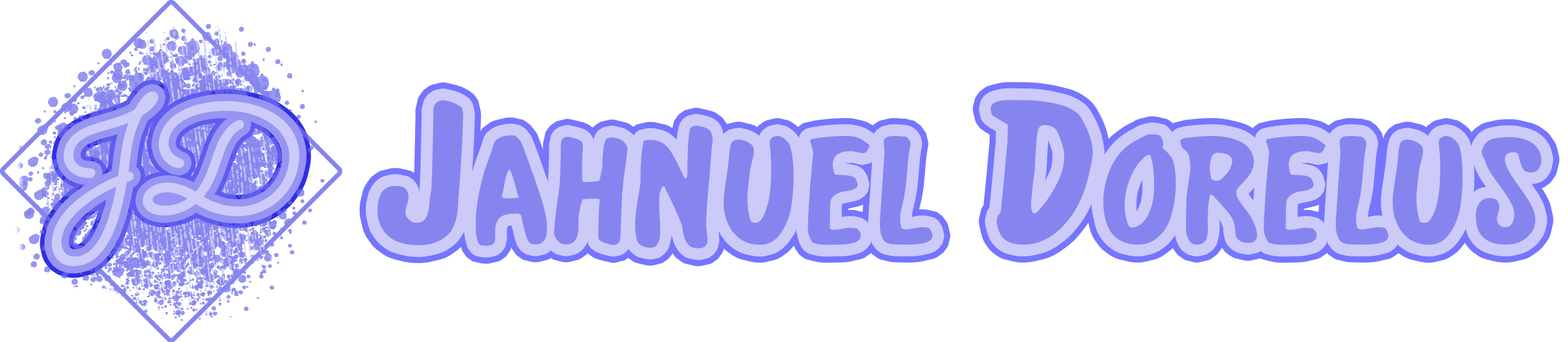
<style>
.page{position:relative;width:1568px;height:342px;background:#ffffff}
.page>*{position:absolute;margin:0}
.t1{font:151.5px "Sacramento-Regular";color:#cbcaf8;font-weight:bold;font-style:italic}
.t2{font:195.8px "BroadwayCopyistText";color:#8685ef;scale:1.25 1}
</style>
<div class="page">
<p class="t1" style="left:51px;top:91px;width:248px;height:175px">JD</p>
<p class="t2" style="left:377px;top:100px;width:1165px;height:148px">Jahnuel Dorelus</p>
</div>
